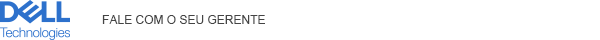
<style>
.page{position:relative;width:600px;height:40px;background:#ffffff}
.page>*{position:absolute;margin:0}
.t1{font:12px "ArialMT";color:#444444;text-transform:uppercase}
</style>
<div class="page">
<p class="t1" style="left:102px;top:15px;width:163px;height:9px">FALE COM O SEU gerente</p>
</div>
